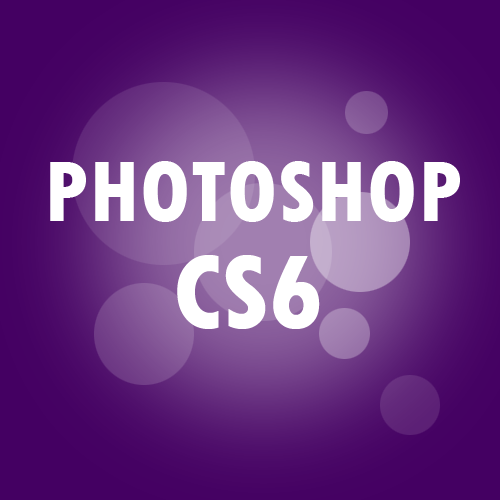
<style>
.page{position:relative;width:500px;height:500px}
.page>*{position:absolute;margin:0}
.t1{font:90px "TwCenMT-CondensedExtraBold";color:#ffffff}
.t2{font:110px "TwCenMT-CondensedExtraBold";color:#ffffff}
</style>
<div class="page">
<p class="t1" style="left:50px;top:161px;width:410px;height:61px">PHOTOSHOP</p>
<p class="t2" style="left:177px;top:255px;width:143px;height:74px">CS6</p>
</div>
